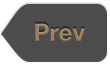
<style>
.page{position:relative;width:110px;height:65px;background:#4c4c4c}
.page>*{position:absolute;margin:0}
.t1{font:24px "HelveticaNeue-Bold";color:#a58c69}
</style>
<div class="page">
<p class="t1" style="left:35px;top:23px;width:50px;height:19px">Prev</p>
</div>
